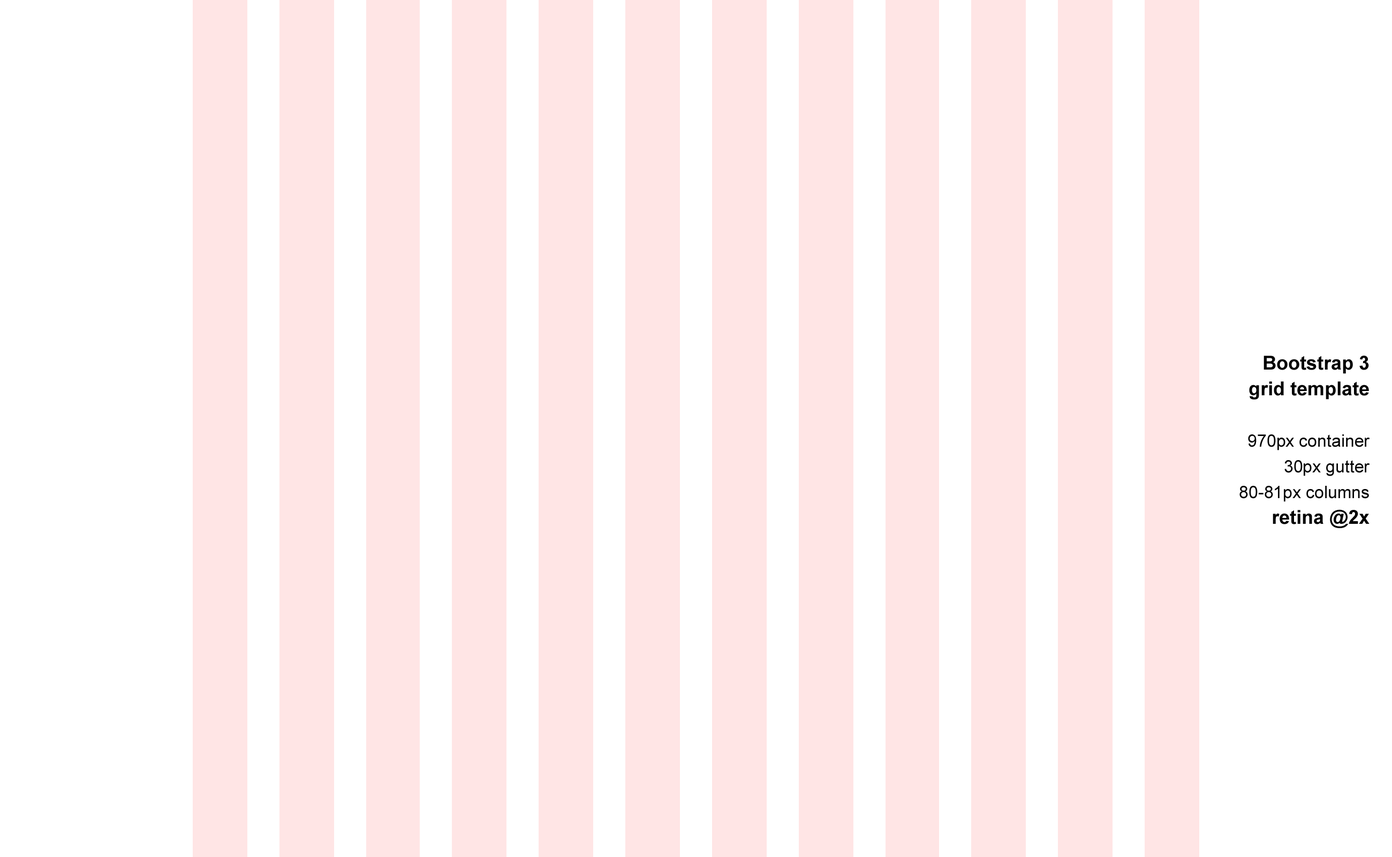
<style>
.page{position:relative;width:1392px;height:857px;background:#ffffff}
.page>*{position:absolute;margin:0}
.t1{font:17.1px/25.7px "ArialMT";color:#000000}
.t2{font:19.3px/25.7px "Arial-BoldMT";color:#000000}
</style>
<div class="page">
<p class="t1" style="left:1239px;top:355px;width:131px;height:173px;text-align:right"><span class="t2">Bootstrap 3<br>grid template<br><br></span>970px container<br>30px gutter<br>80-81px columns<span class="t2"><br>retina @2x</span></p>
</div>
